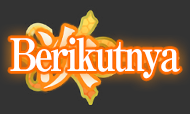
<style>
.page{position:relative;width:190px;height:114px;background:#333333}
.page>*{position:absolute;margin:0}
.t1{font:45px "RyuminPro-ExBold";letter-spacing:-0.08em;color:#ffffff;scale:0.83 1}
</style>
<div class="page">
<p class="t1" style="left:10px;top:37px;width:170px;height:42px">Berikutnya</p>
</div>
